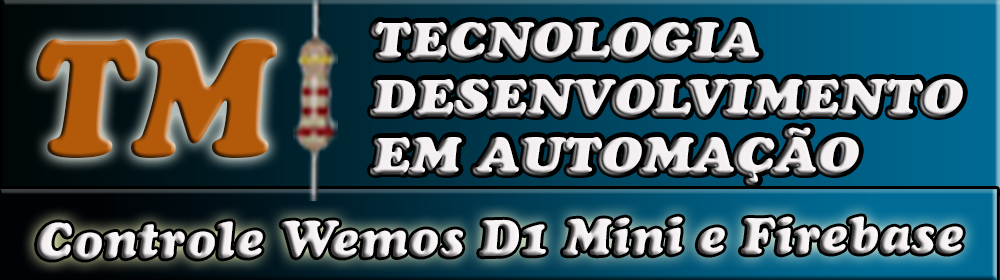
<style>
.page{position:relative;width:1000px;height:280px}
.page>*{position:absolute;margin:0}
.t1{font:48px "CooperBlackStd-Italic";color:#f4eff0;scale:1.14 1}
.t2{font:164.5px "CooperBlackStd-Italic";color:#b2590a;scale:0.93 1}
.t3{font:50.9px "CooperBlackStd-Italic"}
</style>
<div class="page">
<p class="t1" style="left:372px;top:22px;width:591px;height:161px">TECNOLOGIA<br>DESENVOLVIMENTO<br>EM AUTOMAÇÃO</p>
<p class="t2" style="left:36px;top:39px;width:241px;height:119px">TM</p>
<p class="t3" style="left:37px;top:216px;width:926px;height:44px">Controle Wemos D1 Mini e Firebase</p>
</div>
